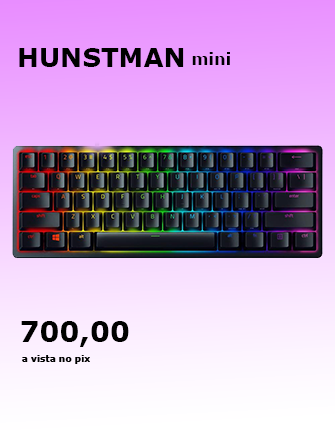
<style>
.page{position:relative;width:335px;height:430px}
.page>*{position:absolute;margin:0}
.t1{font:26.1px "Verdana-Bold";color:#000000}
.t2{font:16.3px "Verdana-Bold";color:#000000}
.t3{font:28.3px "Verdana-Bold";color:#000000}
</style>
<div class="page">
<p class="t1" style="left:19px;top:48px;width:165px;height:19px">HUNSTMAN</p>
<p class="t2" style="left:192px;top:52px;width:38px;height:13px">mini</p>
<p class="t3" style="left:21px;top:321px;width:108px;height:26px">700,00</p>
</div>
